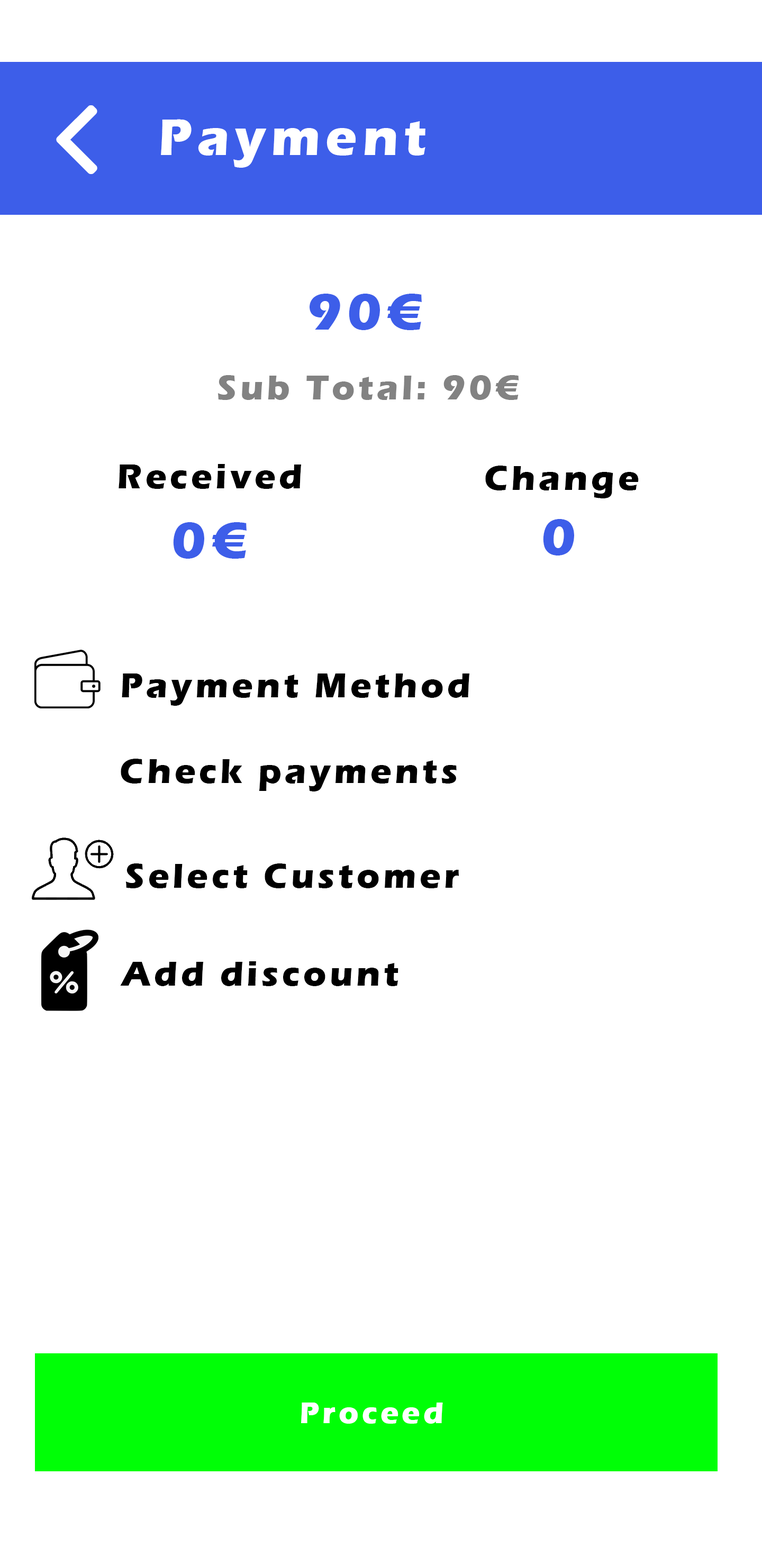
<style>
.page{position:relative;width:762px;height:1566px;background:#ffffff}
.page>*{position:absolute;margin:0}
.t1{font:52.9px "ErasITC-Bold";letter-spacing:0.1em;color:#ffffff}
.t2{font:52.9px "ErasITC-Bold";letter-spacing:0.1em;color:#3d5ee9}
.t3{font:35.3px "ErasITC-Bold";letter-spacing:0.1em;color:#828282}
.t4{font:35.3px "ErasITC-Bold";letter-spacing:0.1em;color:#000000}
.t5{font:30.9px "ErasITC-Bold";letter-spacing:0.1em;color:#ffffff}
</style>
<div class="page">
<p class="t1" style="left:161px;top:119px;width:264px;height:49px">Payment</p>
<p class="t2" style="left:309px;top:294px;width:113px;height:36px">90€</p>
<p class="t3" style="left:217px;top:375px;width:302px;height:25px">Sub Total: 90€</p>
<p class="t4" style="left:118px;top:464px;width:183px;height:25px">Received</p>
<p class="t4" style="left:485px;top:465px;width:153px;height:33px">Change</p>
<p class="t2" style="left:543px;top:519px;width:31px;height:36px">0</p>
<p class="t2" style="left:173px;top:522px;width:73px;height:37px">0€</p>
<p class="t4" style="left:122px;top:673px;width:348px;height:33px">Payment Method</p>
<p class="t4" style="left:121px;top:758px;width:335px;height:33px">Check payments</p>
<p class="t4" style="left:125px;top:863px;width:334px;height:25px">Select Customer</p>
<p class="t4" style="left:120px;top:961px;width:278px;height:25px">Add discount</p>
<p class="t5" style="left:301px;top:1402px;width:142px;height:21px">Proceed</p>
</div>
